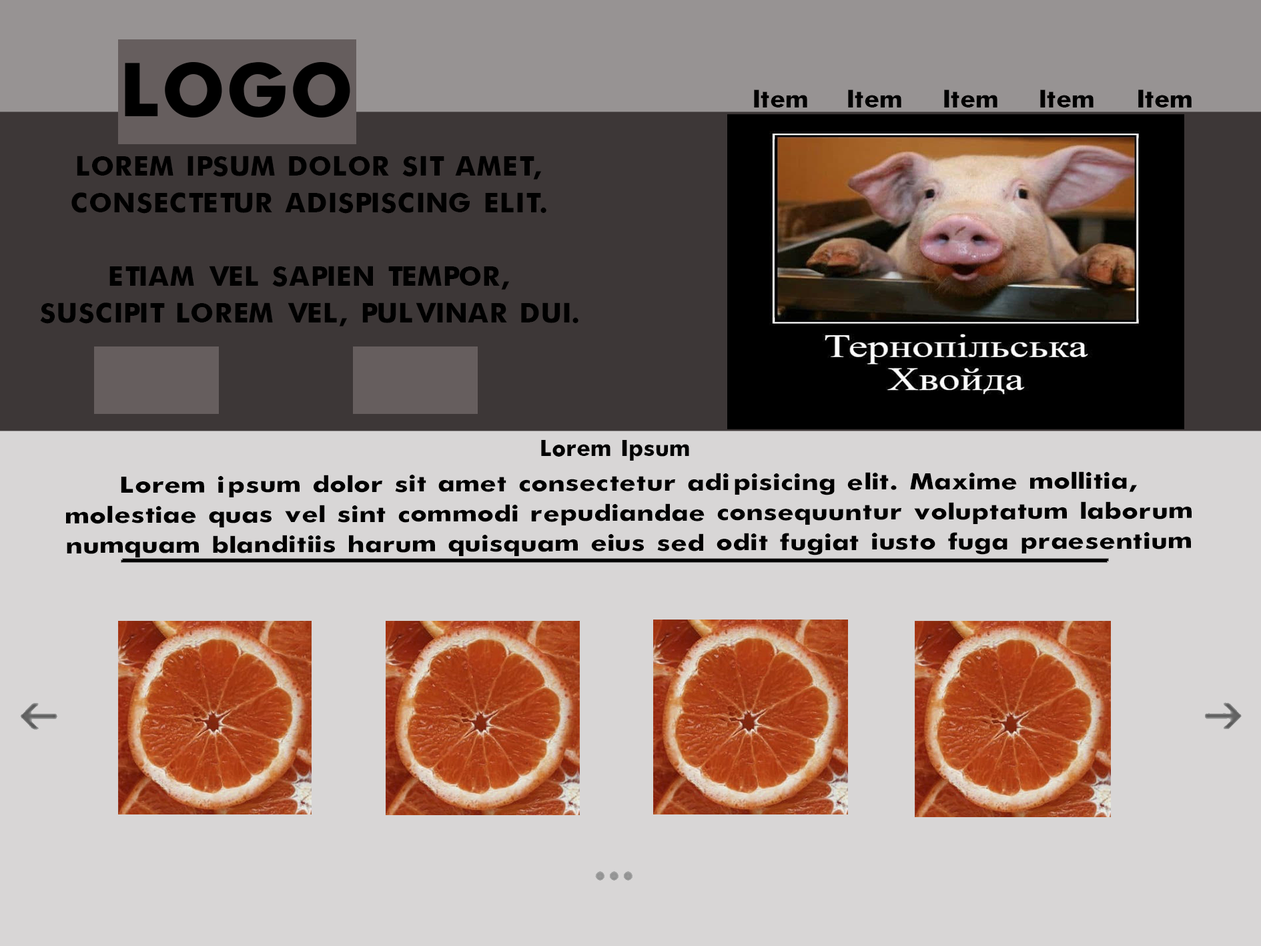
<style>
.page{position:relative;width:1261px;height:946px;background:#d8d6d6}
.page>*{position:absolute;margin:0}
.t1{font:27.8px "Futura-Bold";color:#000000}
.t2{font:30.6px "Futura-Bold";color:#000000}
.t3{font:25px "Futura-Bold";color:#000000}
.t4{font:25px "Futura-Bold";color:#000000;scale:1.19 1}
</style>
<div class="page">
<p class="t1" style="left:754px;top:89px;width:53px;height:18px">Item</p>
<p class="t1" style="left:848px;top:89px;width:53px;height:18px">Item</p>
<p class="t1" style="left:944px;top:89px;width:54px;height:18px">Item</p>
<p class="t1" style="left:1040px;top:89px;width:54px;height:18px">Item</p>
<p class="t2" style="left:40px;top:155px;width:539px;height:171px;text-align:center">LOREM IPSUM DOLOR SIT AMET,<br>CONSECTETUR ADISPISCING ELIT.<br><br>ETIAM VEL SAPIEN TEMPOR,<br>SUSCIPIT LOREM VEL, PULVINAR DUI.</p>
<p class="t3" style="left:541px;top:440px;width:148px;height:20px">Lorem Ipsum</p>
<p class="t4" style="left:66px;top:471px;width:1126px;height:86px;text-align:center">Lorem ipsum dolor sit amet consectetur adipisicing elit. Maxime mollitia,<br>molestiae quas vel sint commodi repudiandae consequuntur voluptatum laborum<br>numquam blanditiis harum quisquam eius sed odit fugiat iusto fuga praesentium</p>
</div>
